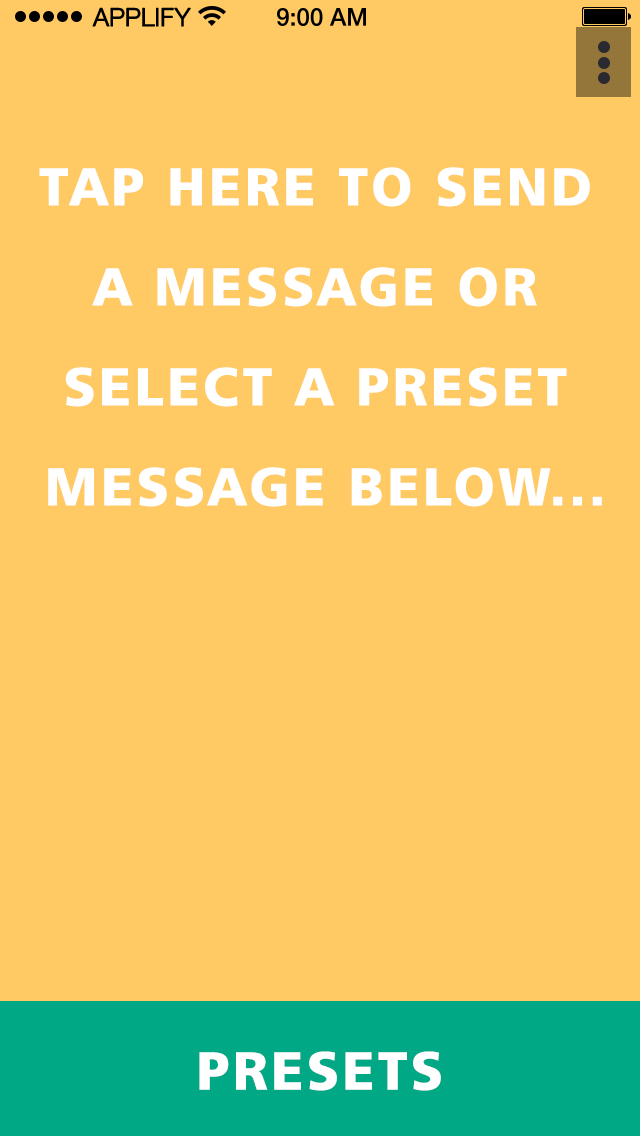
<style>
.page{position:relative;width:640px;height:1136px;background:#ffc964}
.page>*{position:absolute;margin:0}
.t1{font:25px "HelveticaNeueLTCom-Lt";letter-spacing:-0.02em;color:#000000;font-weight:bold}
.t2{font:91.7px/100px "Humanist777BT-BlackB";letter-spacing:0.06em;color:#ffffff}
.t3{font:91.7px "Humanist777BT-BlackB";letter-spacing:0.06em;color:#ffffff}
</style>
<div class="page">
<p class="t1" style="left:92px;top:7px;width:99px;height:20px">APPLIFY</p>
<p class="t2" style="left:39px;top:167px;width:563px;height:340px;text-align:center">TAP HERE TO SEND <br>A MESSAGE OR <br>SELECT A PRESET <br>MESSAGE BELOW...</p>
<p class="t3" style="left:199px;top:1051px;width:242px;height:40px">PRESETS</p>
</div>
